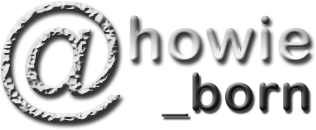
<style>
.page{position:relative;width:316px;height:130px;background:#ffffff}
.page>*{position:absolute;margin:0}
.t1{font:130px "GillSansMT";letter-spacing:0.025em}
.t2{font:62.4px "ArialRoundedMTBold";letter-spacing:0.025em}
.t3{font:52px "ArialRoundedMTBold";letter-spacing:0.025em}
</style>
<div class="page">
<p class="t1" style="left:1px;top:1px;width:120px;height:122px">@</p>
<p class="t2" style="left:130px;top:15px;width:181px;height:47px">howie</p>
<p class="t3" style="left:161px;top:72px;width:148px;height:45px">_born</p>
</div>
